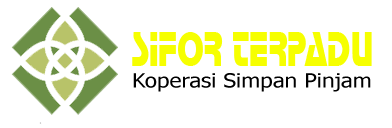
<style>
.page{position:relative;width:392px;height:128px;background:#ffffff}
.page>*{position:absolute;margin:0}
.t1{font:51.5px "StopD";color:#f6ff00;scale:0.71 1}
.t2{font:19.5px "Tahoma";color:#000000;scale:1.16 1}
</style>
<div class="page">
<p class="t1" style="left:132px;top:32px;width:240px;height:34px">Sifor Terpadu</p>
<p class="t2" style="left:133px;top:73px;width:238px;height:19px">Koperasi Simpan Pinjam</p>
</div>
